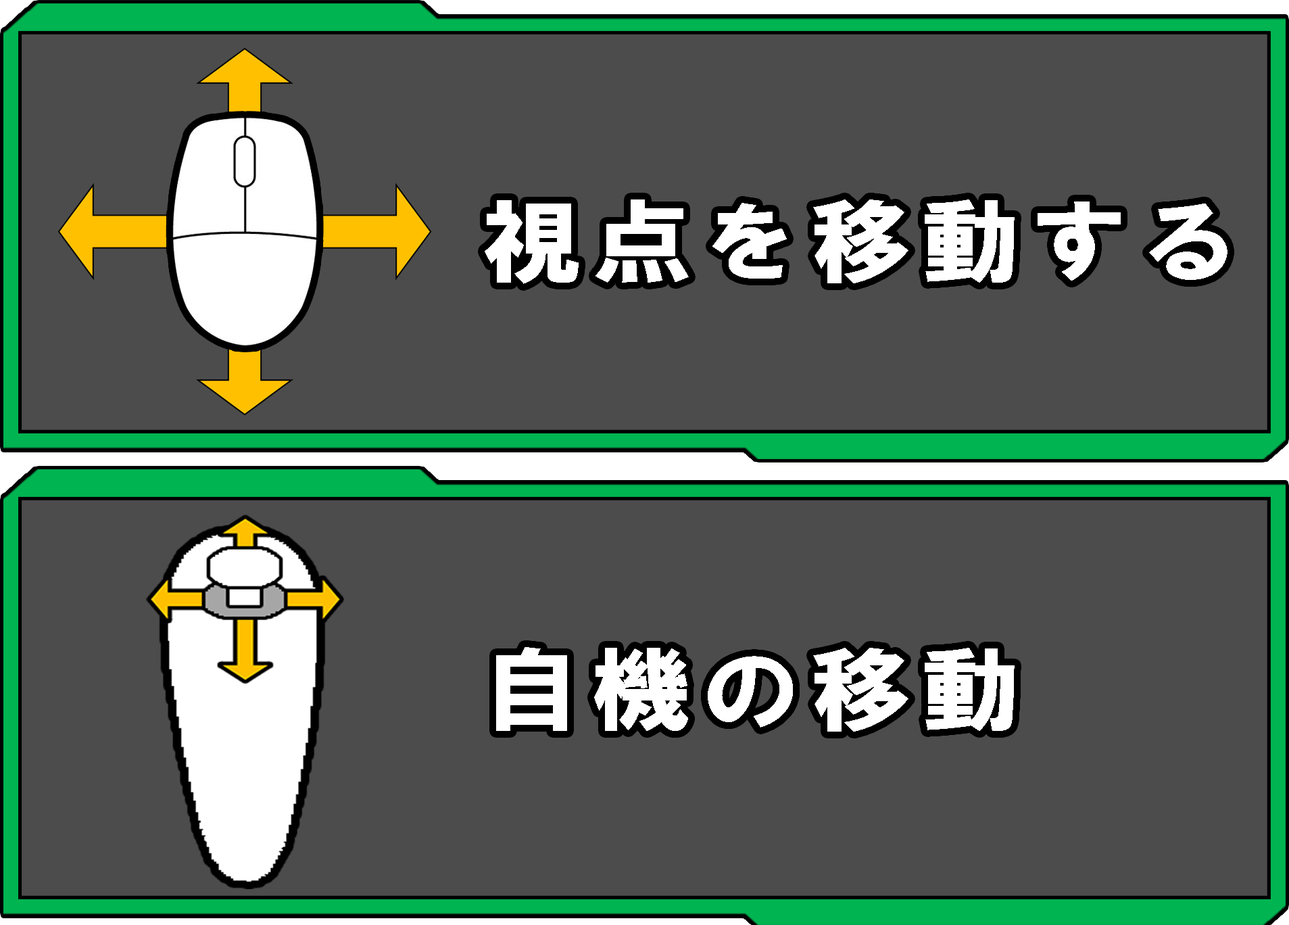
<style>
.page{position:relative;width:1289px;height:925px;background:#4c4c4c}
.page>*{position:absolute;margin:0}
.t1{font:91.3px "HGSSoeiKakugothicUB";letter-spacing:0.08em;color:#ffffff;scale:1.11 1}
</style>
<div class="page">
<p class="t1" style="left:485px;top:199px;width:743px;height:85px">視点を移動する</p>
<p class="t1" style="left:496px;top:647px;width:519px;height:85px">自機の移動</p>
</div>
